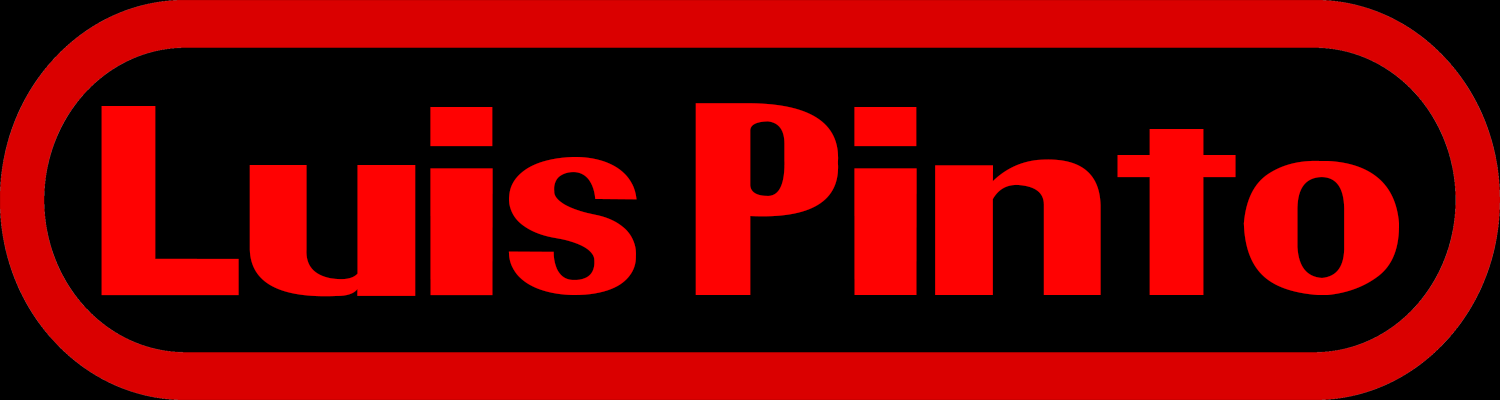
<style>
.page{position:relative;width:1500px;height:400px;background:#000000}
.page>*{position:absolute;margin:0}
.t1{font:241.7px "Pretendo";color:#ff0202}
</style>
<div class="page">
<p class="t1" style="left:101px;top:103px;width:1298px;height:194px">Luis Pinto</p>
</div>
